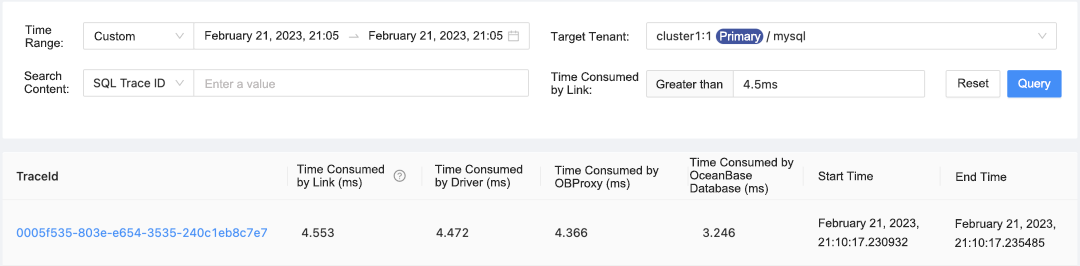
<style>
.page{position:relative;width:1080px;height:266px;background:#ffffff}
.page>*{position:absolute;margin:0}
.t1{font:12px/13px "ArialMT";color:#2b2b2b}
.t2{font:12px "ArialMT";color:#2b2b2b}
.t3{font:12px "ArialMT";color:#ffffff}
.t4{font:12px "ArialMT";color:#bebbbb}
.t5{font:12px/19px "ArialMT";color:#2b2b2b}
</style>
<div class="page">
<p class="t1" style="left:25px;top:25px;width:38px;height:25px">Time <br>Range:</p>
<p class="t2" style="left:94px;top:31px;width:41px;height:10px">Custom</p>
<p class="t2" style="left:205px;top:31px;width:144px;height:12px">February 21, 2023, 21:05:0</p>
<p class="t2" style="left:369px;top:31px;width:144px;height:12px">February 21, 2023, 21:05:0</p>
<p class="t2" style="left:550px;top:32px;width:79px;height:12px">Target Tenant:</p>
<p class="t3" style="left:720px;top:31px;width:41px;height:12px">Primary</p>
<p class="t1" style="left:24px;top:71px;width:45px;height:23px">Search <br>Content:</p>
<p class="t1" style="left:551px;top:72px;width:88px;height:25px">Time Consumed <br>by Link:</p>
<p class="t2" style="left:958px;top:78px;width:31px;height:10px">Reset</p>
<p class="t3" style="left:1018px;top:78px;width:33px;height:13px">Query</p>
<p class="t4" style="left:205px;top:79px;width:70px;height:10px">Enter a value</p>
<p class="t2" style="left:656px;top:79px;width:67px;height:10px">Greater than</p>
<p class="t1" style="left:689px;top:157px;width:105px;height:38px">Time Consumed by OceanBase Database (ms)</p>
<p class="t1" style="left:297px;top:164px;width:87px;height:25px">Time Consumed by Link (ms)</p>
<p class="t1" style="left:435px;top:164px;width:88px;height:25px">Time Consumed by Driver (ms)</p>
<p class="t1" style="left:554px;top:165px;width:105px;height:25px">Time Consumed by OBProxy (ms)</p>
<p class="t2" style="left:818px;top:171px;width:55px;height:10px">Start Time</p>
<p class="t2" style="left:956px;top:172px;width:51px;height:10px">End Time</p>
<p class="t5" style="left:818px;top:218px;width:101px;height:29px">February 21, 2023, 21:10:17.230932</p>
<p class="t5" style="left:955px;top:219px;width:101px;height:28px">February 21, 2023, 21:10:17.235485</p>
</div>
